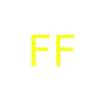
<style>
.page{position:relative;width:100px;height:100px;background:#ffffff}
.page>*{position:absolute;margin:0}
.t1{font:43px "DejaVuSans";color:#f6fe22}
</style>
<div class="page">
<p class="t1" style="left:31px;top:34px;width:44px;height:32px">FF</p>
</div>
